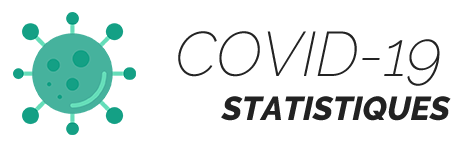
<style>
.page{position:relative;width:468px;height:148px;background:#ffffff}
.page>*{position:absolute;margin:0}
.t1{font:62.5px "Raleway-ExtraLightItalic";color:#232323}
.t2{font:33.3px "Raleway-ExtraBoldItalic";color:#222222}
</style>
<div class="page">
<p class="t1" style="left:178px;top:31px;width:262px;height:55px">COVID-19</p>
<p class="t2" style="left:221px;top:96px;width:230px;height:25px">STATISTIQUES</p>
</div>
